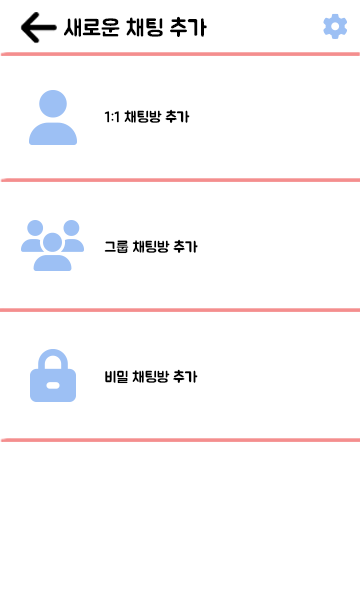
<style>
.page{position:relative;width:360px;height:600px;background:#ffffff}
.page>*{position:absolute;margin:0}
.t1{font:23px "BMJUA";color:#000000}
.t2{font:15px "BMJUA";color:#000000}
</style>
<div class="page">
<p class="t1" style="left:64px;top:16px;width:143px;height:21px">새로운 채팅 추가</p>
<p class="t2" style="left:104px;top:109px;width:86px;height:14px">1:1 채팅방 추가</p>
<p class="t2" style="left:104px;top:239px;width:94px;height:15px">그룹 채팅방 추가</p>
<p class="t2" style="left:105px;top:369px;width:93px;height:15px">비밀 채팅방 추가</p>
</div>
